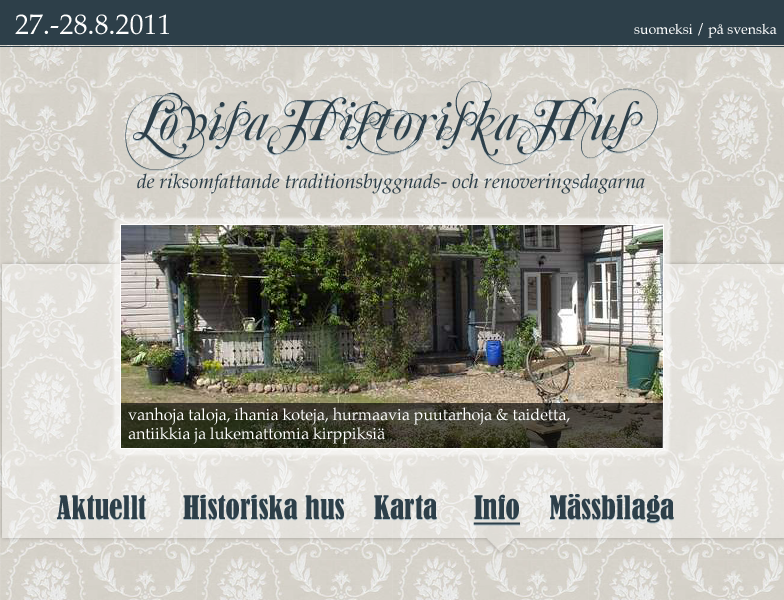
<style>
.page{position:relative;width:784px;height:600px}
.page>*{position:absolute;margin:0}
.t1{font:28px "Palatino-Roman";color:#ffffff}
.t2{font:14px "Palatino-Roman";color:#ffffff}
.t3{font:60px "MutluOrnamental";color:#2d3f49}
.t4{font:20px "Palatino-Italic";color:#2d3f49}
.t5{font:16px "Palatino-Roman";color:#ffffff}
.t6{font:30px "BernardMT-Condensed";color:#2d3f49}
.t7{font:30px "BernardMT-Condensed";color:#2d3f49;text-decoration:underline}
</style>
<div class="page">
<p class="t1" style="left:15px;top:14px;width:154px;height:21px">27.-28.8.2011</p>
<p class="t2" style="left:634px;top:23px;width:143px;height:15px">suomeksi / på svenska</p>
<p class="t3" style="left:125px;top:81px;width:533px;height:89px">Lovisa Historiska Hus</p>
<p class="t4" style="left:137px;top:173px;width:508px;height:21px">de riksomfattande traditionsbyggnads- och renoveringsdagarna</p>
<p class="t5" style="left:128px;top:407px;width:442px;height:37px">vanhoja taloja, ihania koteja, hurmaavia puutarhoja &amp; taidetta,<br>antiikkia ja lukemattomia kirppiksiä</p>
<p class="t6" style="left:57px;top:494px;width:617px;height:31px">Aktuellt     Historiska hus    Karta     <span class="t7">Info</span>    Mässbilaga</p>
</div>
